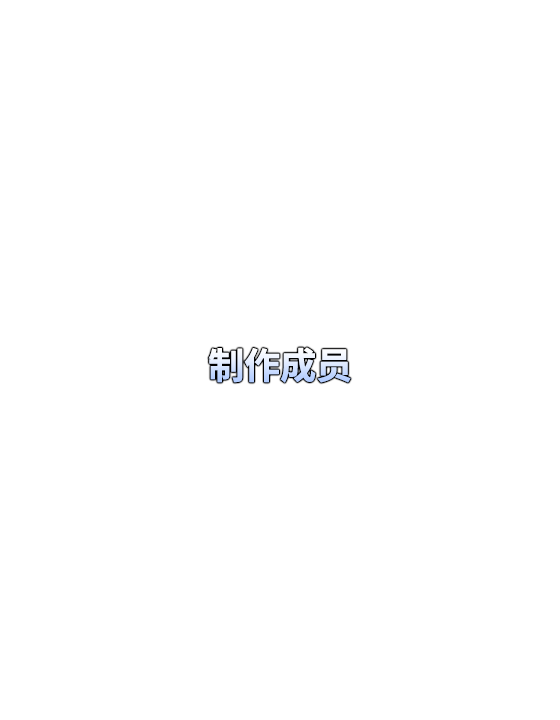
<style>
.page{position:relative;width:560px;height:720px;background:#ffffff}
.page>*{position:absolute;margin:0}
.t1{font:36px "SourceHanSansSC-Bold";letter-spacing:-0.03em;font-weight:bold}
</style>
<div class="page">
<p class="t1" style="left:208px;top:347px;width:143px;height:36px">制作成员</p>
</div>
